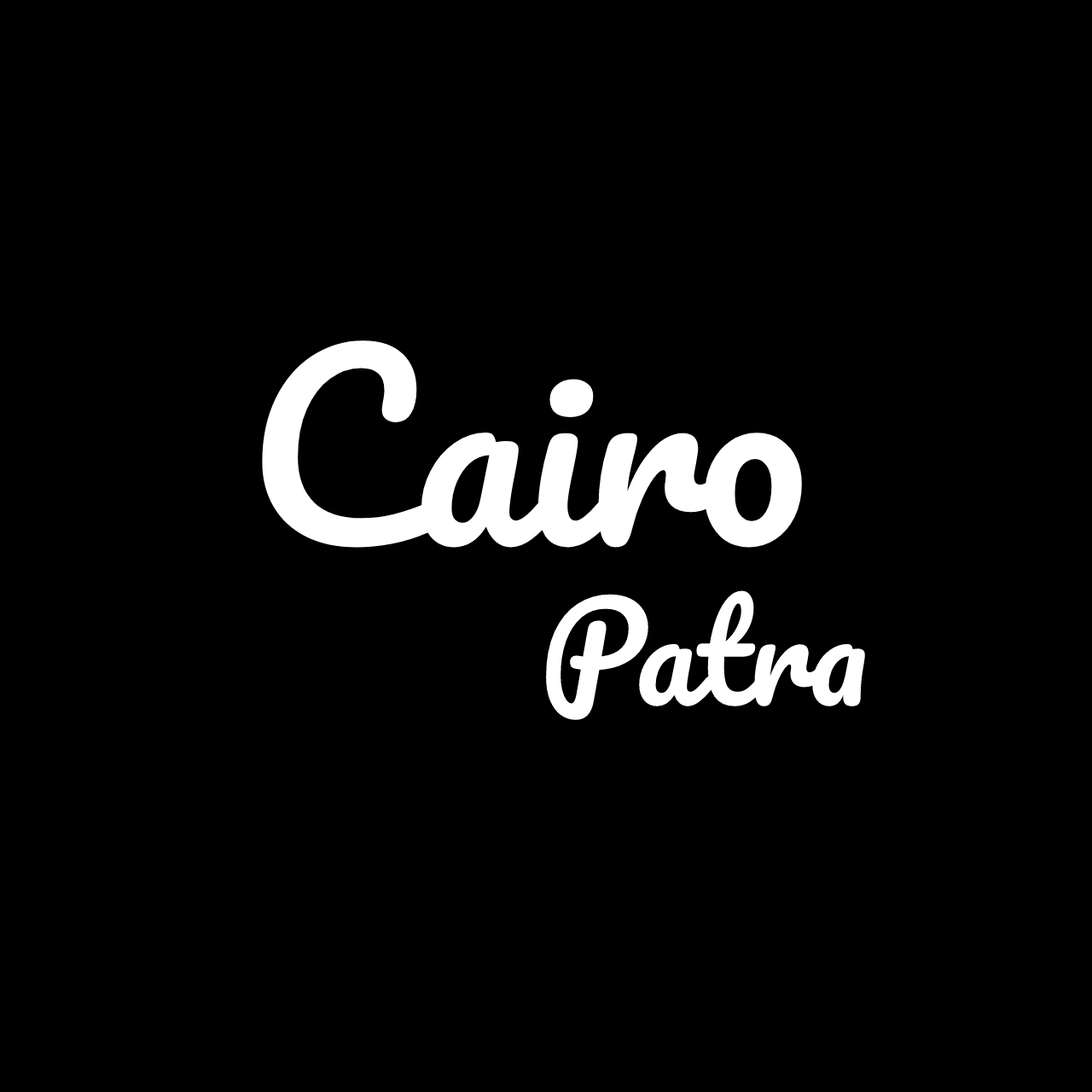
<style>
.page{position:relative;width:1092px;height:1092px;background:#000000}
.page>*{position:absolute;margin:0}
.t1{font:242.3px "Pacifico-Regular";color:#ffffff}
.t2{font:131.4px "Pacifico-Regular";color:#ffffff}
</style>
<div class="page">
<p class="t1" style="left:262px;top:340px;width:540px;height:208px">Cairo</p>
<p class="t2" style="left:546px;top:590px;width:319px;height:130px">Patra</p>
</div>
